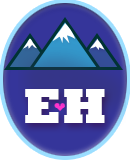
<style>
.page{position:relative;width:130px;height:160px;background:#ffffff}
.page>*{position:absolute;margin:0}
.t1{font:51.4px "Rockwell-ExtraBold";color:#ffffff}
</style>
<div class="page">
<p class="t1" style="left:25px;top:89px;width:80px;height:34px">EH</p>
</div>
